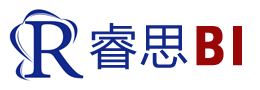
<style>
.page{position:relative;width:260px;height:90px;background:#ffffff}
.page>*{position:absolute;margin:0}
.t1{font:48px "MicrosoftYaHei";letter-spacing:0.06em;color:#12288b}
.t2{font:58px "FranklinGothic-DemiCond";letter-spacing:0.04em;color:#990707;font-weight:bold}
</style>
<div class="page">
<p class="t1" style="left:89px;top:23px;width:99px;height:47px">睿思</p>
<p class="t2" style="left:196px;top:26px;width:46px;height:40px">BI</p>
</div>
